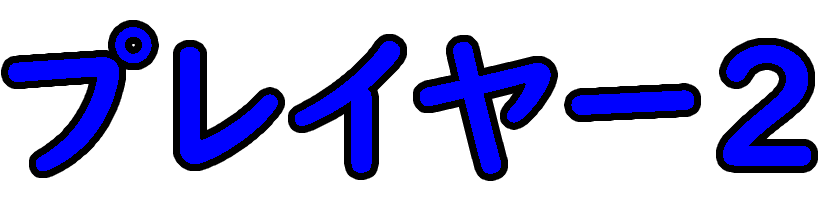
<style>
.page{position:relative;width:826px;height:200px;background:#ffffff}
.page>*{position:absolute;margin:0}
.t1{font:161.6px "UDDigiKyokashoNK-B";color:#0001ff}
</style>
<div class="page">
<p class="t1" style="left:8px;top:27px;width:803px;height:147px">プレイヤー2</p>
</div>
